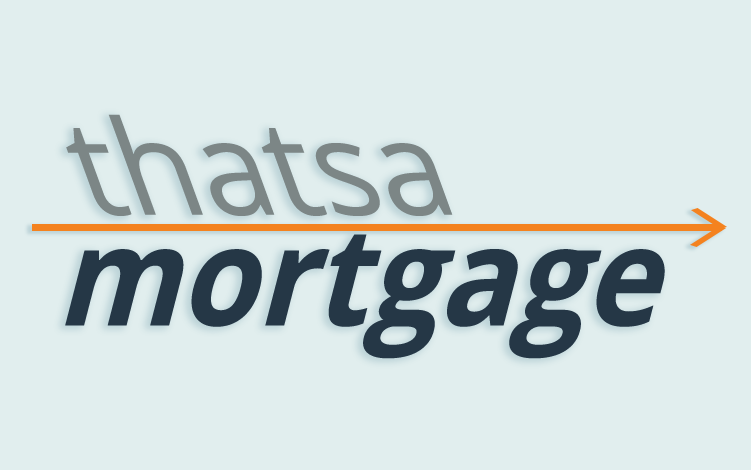
<style>
.page{position:relative;width:751px;height:470px;background:#e1eeee}
.page>*{position:absolute;margin:0}
.t1{font:139.9px "OpenSans";color:#7c8686;scale:0.92 1}
.t2{font:141.4px "OpenSans-Bold";color:#253746;scale:0.88 1}
</style>
<div class="page">
<p class="t1" style="left:66px;top:114px;width:387px;height:102px">thatsa</p>
<p class="t2" style="left:65px;top:234px;width:600px;height:125px">mortgage</p>
</div>
